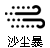
<style>
.page{position:relative;width:50px;height:48px;background:#ffffff}
.page>*{position:absolute;margin:0}
.t1{font:12px "OPPOSans-R";color:#000000}
</style>
<div class="page">
<p class="t1" style="left:8px;top:36px;width:35px;height:11px">沙尘暴</p>
</div>
